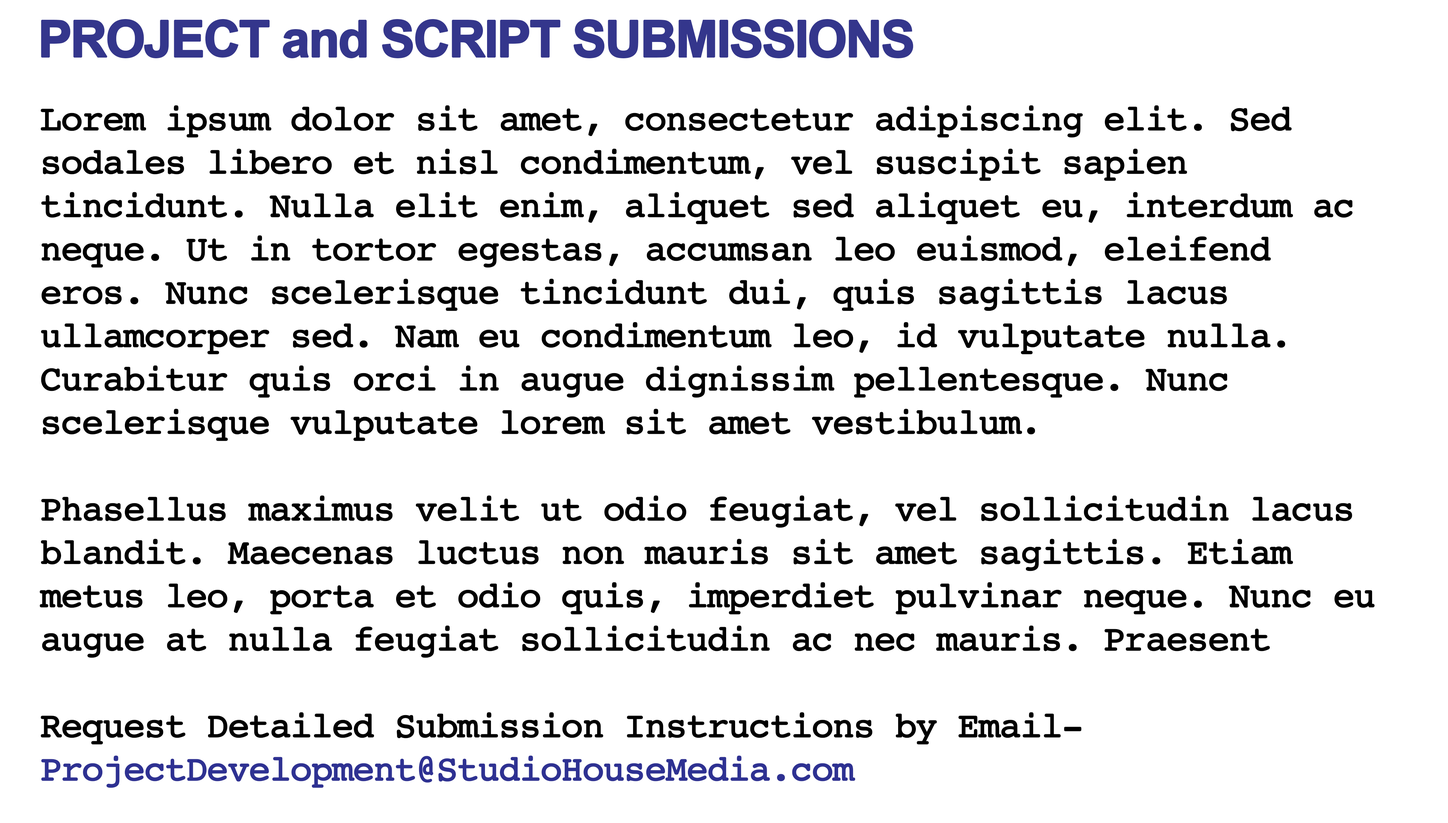
<style>
.page{position:relative;width:1448px;height:823px;background:#ffffff}
.page>*{position:absolute;margin:0}
.t1{font:50.6px "Arial-BoldMT";letter-spacing:-0.05em;color:#34368c;font-weight:bold}
.t2{font:36.1px "Courier";letter-spacing:-0.05em;color:#000000;font-weight:bold}
.t3{font:36.1px "Courier";letter-spacing:-0.05em;color:#2e3192;font-weight:bold}
</style>
<div class="page">
<p class="t1" style="left:41px;top:19px;width:873px;height:39px">PROJECT and SCRIPT SUBMISSIONS</p>
<p class="t2" style="left:40px;top:105px;width:1335px;height:683px">Lorem ipsum dolor sit amet, consectetur adipiscing elit. Sed sodales libero et nisl condimentum, vel suscipit sapien tincidunt. Nulla elit enim, aliquet sed aliquet eu, interdum ac neque. Ut in tortor egestas, accumsan leo euismod, eleifend eros. Nunc scelerisque tincidunt dui, quis sagittis lacus ullamcorper sed. Nam eu condimentum leo, id vulputate nulla. Curabitur quis orci in augue dignissim pellentesque. Nunc scelerisque vulputate lorem sit amet vestibulum. <br><br>Phasellus maximus velit ut odio feugiat, vel sollicitudin lacus blandit. Maecenas luctus non mauris sit amet sagittis. Etiam metus leo, porta et odio quis, imperdiet pulvinar neque. Nunc eu augue at nulla feugiat sollicitudin ac nec mauris. Praesent<br><br>Request Detailed Submission Instructions by Email-<br><span class="t3">ProjectDevelopment@StudioHouseMedia.com</span></p>
</div>
